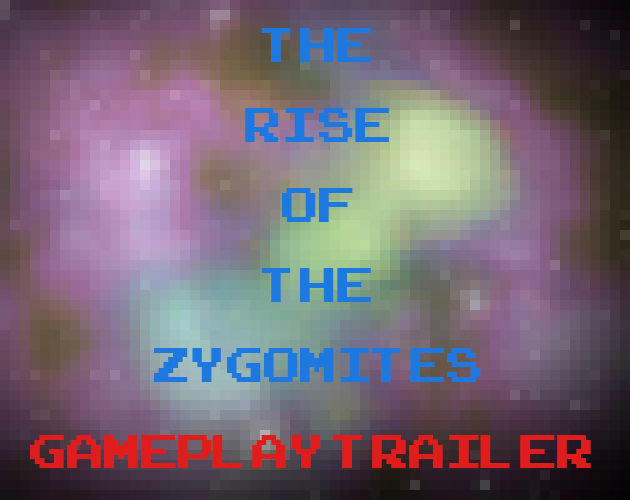
<style>
.page{position:relative;width:630px;height:500px}
.page>*{position:absolute;margin:0}
.t1{font:66.7px "ArcadeClassic";color:#1d79e0}
.t2{font:67.4px "ArcadeClassic";color:#e01d1d}
</style>
<div class="page">
<p class="t1" style="left:154px;top:28px;width:327px;height:354px;text-align:center">The<br>rise<br>of<br>the<br>zygomites</p>
<p class="t2" style="left:30px;top:435px;width:561px;height:33px">Gameplay Trailer</p>
</div>
